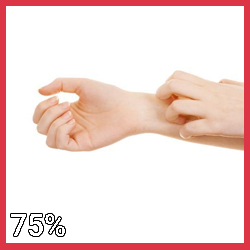
<style>
.page{position:relative;width:250px;height:250px;background:#ffffff}
.page>*{position:absolute;margin:0}
.t1{font:30px "Roboto-Medium";color:#ffffff}
</style>
<div class="page">
<p class="t1" style="left:11px;top:214px;width:54px;height:22px">75%</p>
</div>
